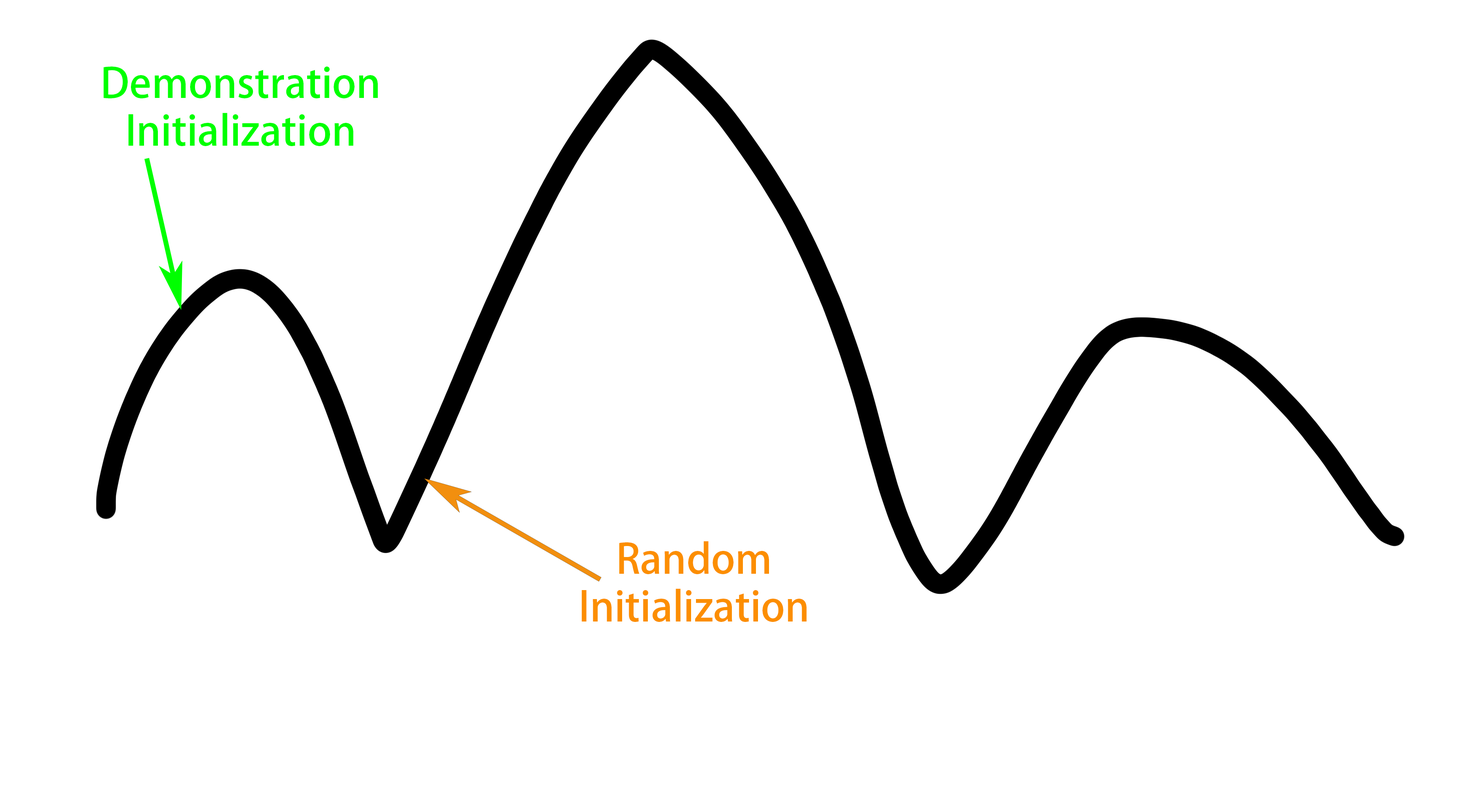
<style>
.page{position:relative;width:1476px;height:808px;background:#ffffff}
.page>*{position:absolute;margin:0}
.t1{font:40.8px/23.8px "AdobeHeitiStd-Regular";color:#00ff00}
.t2{font:40.8px/23.8px "AdobeHeitiStd-Regular";color:#fc8e00}
</style>
<div class="page">
<p class="t1" style="left:104px;top:67px;width:274px;height:79px;text-align:center">Demonstration<br><br>Initialization</p>
<p class="t2" style="left:582px;top:541px;width:225px;height:81px;text-align:center">Random<br><br>Initialization</p>
</div>
